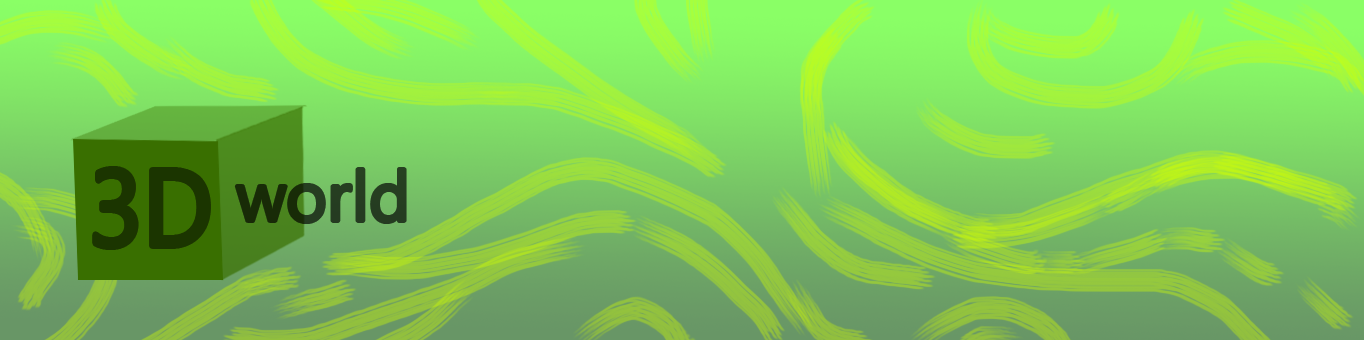
<style>
.page{position:relative;width:1364px;height:340px}
.page>*{position:absolute;margin:0}
.t1{font:108.2px "SegoeUISymbol";color:#1b3500;scale:0.92 1}
.t2{font:70px "SegoeUISymbol"}
</style>
<div class="page">
<p class="t1" style="left:95px;top:169px;width:113px;height:78px">3D</p>
<p class="t2" style="left:236px;top:169px;width:169px;height:53px">world</p>
</div>
